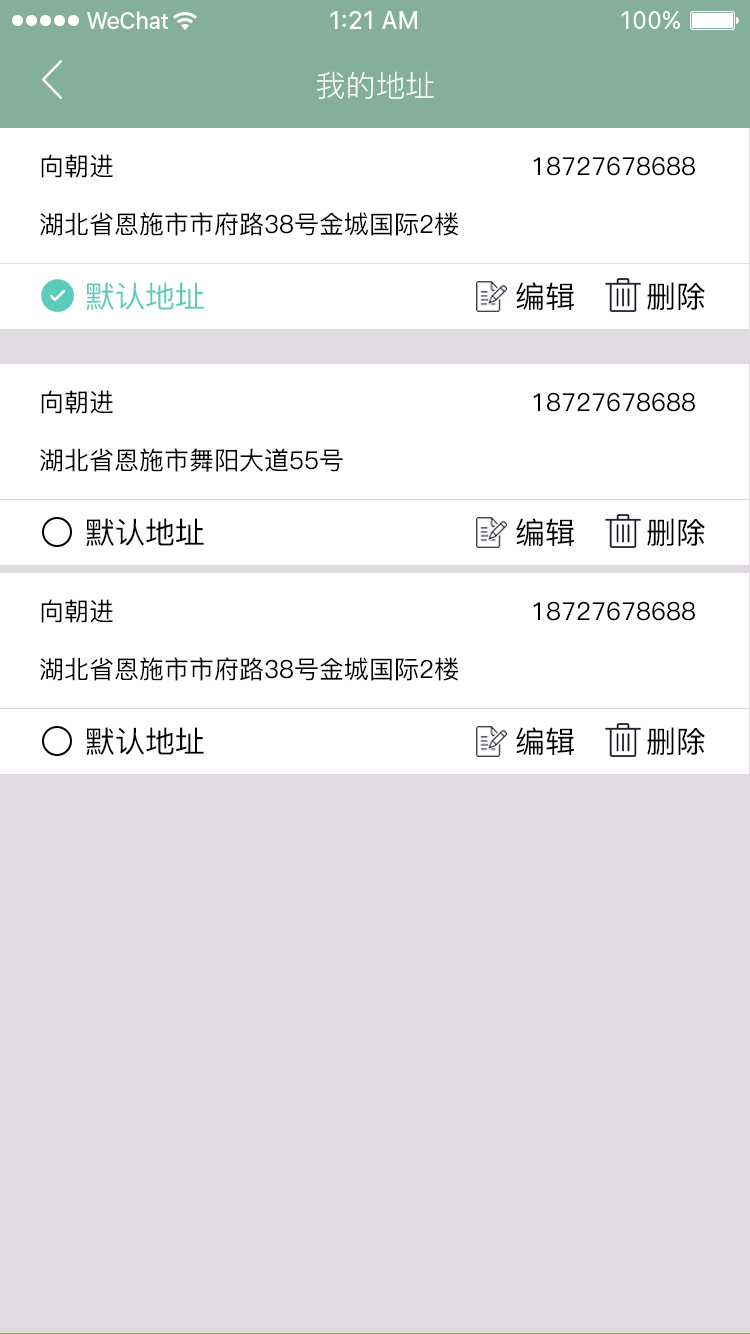
<style>
.page{position:relative;width:750px;height:1334px;background:#ffffff}
.page>*{position:absolute;margin:0}
.t1{font:30px "PingFang-SC-Regular";color:#ffffff;text-transform:uppercase}
.t2{font:25px "PingFang-SC-Medium";color:#010101;text-transform:uppercase}
.t3{font:30px "PingFang-SC-Medium";color:#5ccbbc;text-transform:uppercase}
.t4{font:30px "PingFang-SC-Medium";color:#000000;text-transform:uppercase}
</style>
<div class="page">
<p class="t1" style="left:317px;top:71px;width:117px;height:28px">我的地址</p>
<p class="t2" style="left:41px;top:154px;width:72px;height:24px">向朝进</p>
<p class="t2" style="left:533px;top:156px;width:162px;height:20px">18727678688</p>
<p class="t2" style="left:40px;top:212px;width:418px;height:24px">湖北省恩施市市府路38号金城国际2楼</p>
<p class="t3" style="left:86px;top:282px;width:118px;height:28px">默认地址</p>
<p class="t4" style="left:516px;top:282px;width:58px;height:28px">编辑</p>
<p class="t4" style="left:647px;top:282px;width:58px;height:28px">删除</p>
<p class="t2" style="left:41px;top:390px;width:72px;height:24px">向朝进</p>
<p class="t2" style="left:533px;top:392px;width:162px;height:20px">18727678688</p>
<p class="t2" style="left:40px;top:448px;width:303px;height:24px">湖北省恩施市舞阳大道55号</p>
<p class="t4" style="left:86px;top:518px;width:118px;height:28px">默认地址</p>
<p class="t4" style="left:516px;top:518px;width:58px;height:28px">编辑</p>
<p class="t4" style="left:647px;top:518px;width:58px;height:28px">删除</p>
<p class="t2" style="left:41px;top:599px;width:72px;height:24px">向朝进</p>
<p class="t2" style="left:533px;top:601px;width:162px;height:20px">18727678688</p>
<p class="t2" style="left:40px;top:657px;width:418px;height:24px">湖北省恩施市市府路38号金城国际2楼</p>
<p class="t4" style="left:86px;top:727px;width:118px;height:28px">默认地址</p>
<p class="t4" style="left:516px;top:727px;width:58px;height:28px">编辑</p>
<p class="t4" style="left:647px;top:727px;width:58px;height:28px">删除</p>
</div>
